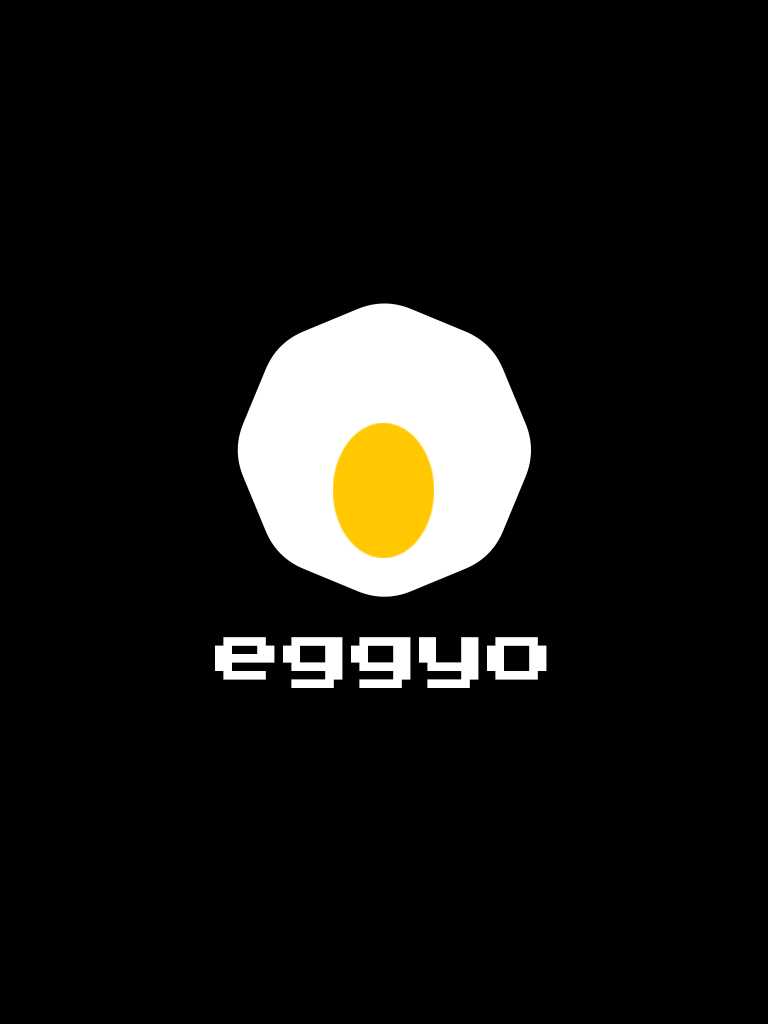
<style>
.page{position:relative;width:768px;height:1024px;background:#000000}
.page>*{position:absolute;margin:0}
.t1{font:67.7px "PressStart2P";color:#ffffff}
</style>
<div class="page">
<p class="t1" style="left:215px;top:637px;width:332px;height:51px">eggyo</p>
</div>
